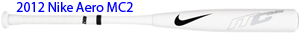
<style>
.page{position:relative;width:300px;height:34px;background:#ffffff}
.page>*{position:absolute;margin:0}
.t1{font:14px "MyriadPro-Regular";color:#0000ff}
</style>
<div class="page">
<p class="t1" style="left:16px;top:2px;width:117px;height:10px">2012 Nike Aero MC2</p>
</div>
